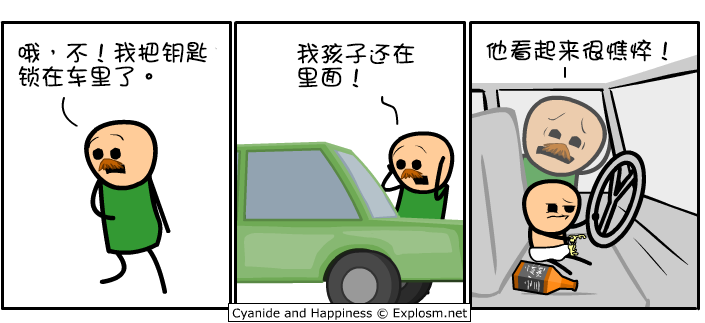
<style>
.page{position:relative;width:705px;height:323px;background:#ffffff}
.page>*{position:absolute;margin:0}
.t1{font:24px/24px "DFGirl";color:#000000}
.t2{font:24px "DFGirl";color:#000000}
</style>
<div class="page">
<p class="t1" style="left:18px;top:41px;width:189px;height:46px">哦，不！我把钥匙<br>锁在车里了。</p>
<p class="t2" style="left:486px;top:39px;width:182px;height:23px">他看起来很憔悴！</p>
<p class="t1" style="left:297px;top:42px;width:118px;height:46px">我孩子还在<br>里面！</p>
</div>
